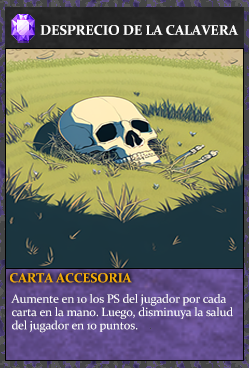
<style>
.page{position:relative;width:249px;height:368px}
.page>*{position:absolute;margin:0}
.t1{font:14px "Constantia-Bold";letter-spacing:-0.02em;color:#ffffff}
.t2{font:13.3px "Constantia-Bold";letter-spacing:-0.02em;color:#f2ac05}
.t3{font:12px/13.3px "Constantia";letter-spacing:-0.02em;color:#ffffff}
</style>
<div class="page">
<p class="t1" style="left:40px;top:25px;width:199px;height:10px">DESPRECIO DE LA CALAVERA</p>
<p class="t2" style="left:10px;top:273px;width:122px;height:10px">CARTA ACCESORIA</p>
<p class="t3" style="left:11px;top:294px;width:222px;height:39px">Aumente en 10 los PS del jugador por cada<br>carta en la mano. Luego, disminuya la salud <br>del jugador en 10 puntos.</p>
</div>
